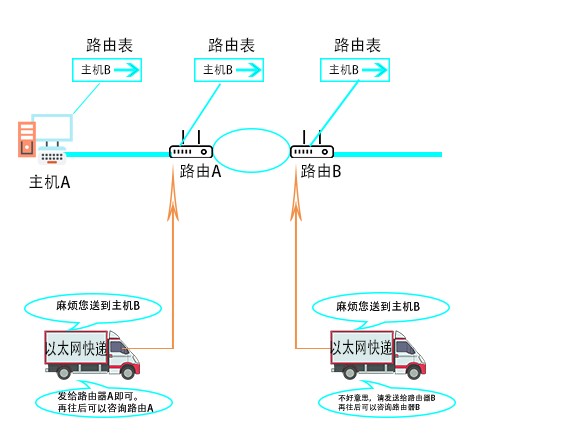
<style>
.page{position:relative;width:563px;height:445px;background:#ffffff}
.page>*{position:absolute;margin:0}
.t1{font:16px "AdobeHeitiStd-Regular";color:#0a0909}
.t2{font:11.8px "AdobeHeitiStd-Regular";color:#0a0909}
.t3{font:11px "AdobeHeitiStd-Regular";color:#0a0909}
.t4{font:16.9px "AdobeHeitiStd-Regular";color:#0a0909;scale:0.75 1}
.t5{font:10px "AdobeHeitiStd-Regular";color:#0a0909}
.t6{font:7.7px "AdobeHeitiStd-Regular";color:#0a0909}
</style>
<div class="page">
<p class="t1" style="left:86px;top:37px;width:47px;height:16px">路由表</p>
<p class="t1" style="left:208px;top:37px;width:47px;height:16px">路由表</p>
<p class="t1" style="left:334px;top:37px;width:47px;height:16px">路由表</p>
<p class="t2" style="left:81px;top:64px;width:30px;height:11px">主机B</p>
<p class="t2" style="left:203px;top:64px;width:30px;height:11px">主机B</p>
<p class="t2" style="left:329px;top:64px;width:30px;height:11px">主机B</p>
<p class="t1" style="left:29px;top:174px;width:42px;height:16px">主机A</p>
<p class="t1" style="left:180px;top:163px;width:42px;height:16px">路由A</p>
<p class="t1" style="left:301px;top:163px;width:40px;height:16px">路由B</p>
<p class="t3" style="left:56px;top:300px;width:84px;height:11px">麻烦您送到主机B</p>
<p class="t3" style="left:56px;top:300px;width:84px;height:11px">麻烦您送到主机B</p>
<p class="t3" style="left:336px;top:301px;width:84px;height:11px">麻烦您送到主机B</p>
<p class="t3" style="left:336px;top:301px;width:84px;height:11px">麻烦您送到主机B</p>
<p class="t4" style="left:45px;top:340px;width:62px;height:17px">以太网快递</p>
<p class="t4" style="left:330px;top:339px;width:62px;height:17px">以太网快递</p>
<p class="t5" style="left:57px;top:391px;width:97px;height:22px">发给路由器A即可。<br>再往后可以咨询路由A</p>
<p class="t5" style="left:57px;top:391px;width:97px;height:22px">发给路由器A即可。<br>再往后可以咨询路由A</p>
<p class="t6" style="left:338px;top:394px;width:97px;height:17px">不好意思，请发送给路由器B<br>再往后可以咨询路由器B</p>
<p class="t6" style="left:338px;top:394px;width:97px;height:17px">不好意思，请发送给路由器B<br>再往后可以咨询路由器B</p>
</div>
